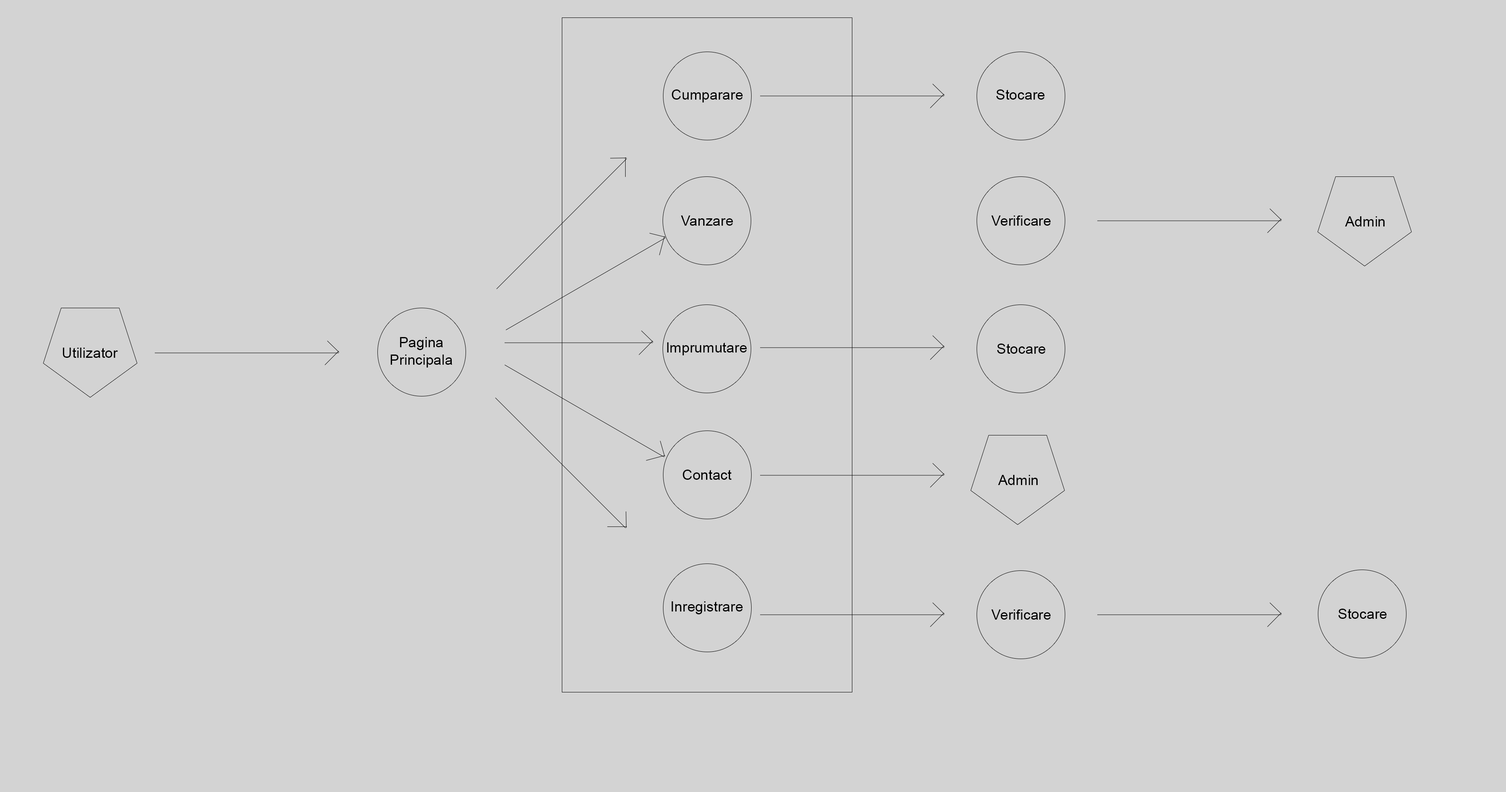
<style>
.page{position:relative;width:1506px;height:792px;background:#d3d3d3}
.page>*{position:absolute;margin:0}
.t1{font:14.4px "ArialMT";color:#000000}
</style>
<div class="page">
<p class="t1" style="left:672px;top:89px;width:71px;height:13px">Cumparare</p>
<p class="t1" style="left:996px;top:89px;width:49px;height:11px">Stocare</p>
<p class="t1" style="left:681px;top:215px;width:52px;height:11px">Vanzare</p>
<p class="t1" style="left:992px;top:215px;width:59px;height:11px">Verificare</p>
<p class="t1" style="left:1345px;top:216px;width:40px;height:10px">Admin</p>
<p class="t1" style="left:391px;top:337px;width:61px;height:30px;text-align:center">Pagina<br>Principala</p>
<p class="t1" style="left:63px;top:347px;width:55px;height:11px">Utilizator</p>
<p class="t1" style="left:667px;top:342px;width:80px;height:13px">Imprumutare</p>
<p class="t1" style="left:997px;top:343px;width:49px;height:11px">Stocare</p>
<p class="t1" style="left:683px;top:469px;width:49px;height:11px">Contact</p>
<p class="t1" style="left:998px;top:475px;width:40px;height:10px">Admin</p>
<p class="t1" style="left:672px;top:601px;width:71px;height:13px">Inregistrare</p>
<p class="t1" style="left:992px;top:609px;width:59px;height:10px">Verificare</p>
<p class="t1" style="left:1339px;top:608px;width:48px;height:10px">Stocare</p>
</div>
